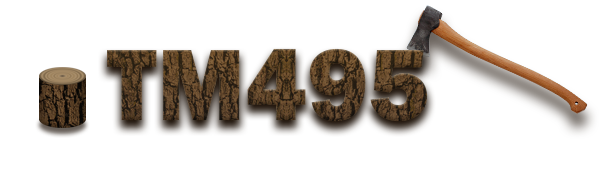
<style>
.page{position:relative;width:600px;height:172px;background:#ffffff}
.page>*{position:absolute;margin:0}
.t1{font:105.1px "FranklinGothic-Heavy"}
</style>
<div class="page">
<p class="t1" style="left:107px;top:48px;width:321px;height:74px">TM495</p>
</div>
